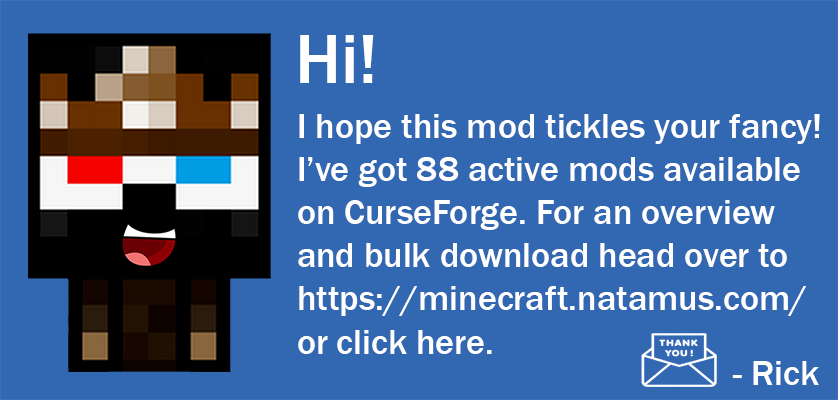
<style>
.page{position:relative;width:838px;height:400px;background:#3267b1}
.page>*{position:absolute;margin:0}
.t1{font:72px "FranklinGothic-Medium";color:#ffffff}
.t2{font:36px "FranklinGothic-Medium";color:#ffffff}
</style>
<div class="page">
<p class="t1" style="left:300px;top:35px;width:74px;height:48px">Hi!</p>
<p class="t2" style="left:298px;top:114px;width:522px;height:240px">I hope this mod tickles your fancy!<br>I’ve got 88 active mods available<br>on CurseForge. For an overview<br>and bulk download head over to <br>https://minecraft.natamus.com/<br>or click here.</p>
<p class="t2" style="left:732px;top:361px;width:87px;height:24px">- Rick</p>
</div>
